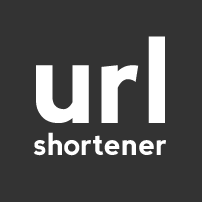
<style>
.page{position:relative;width:202px;height:202px;background:#333333}
.page>*{position:absolute;margin:0}
.t1{font:118.1px "nevis-Bold";color:#ffffff}
.t2{font:30.6px "nevis-Bold";color:#ffffff}
</style>
<div class="page">
<p class="t1" style="left:36px;top:36px;width:129px;height:87px">url</p>
<p class="t2" style="left:33px;top:132px;width:133px;height:24px">shortener</p>
</div>
